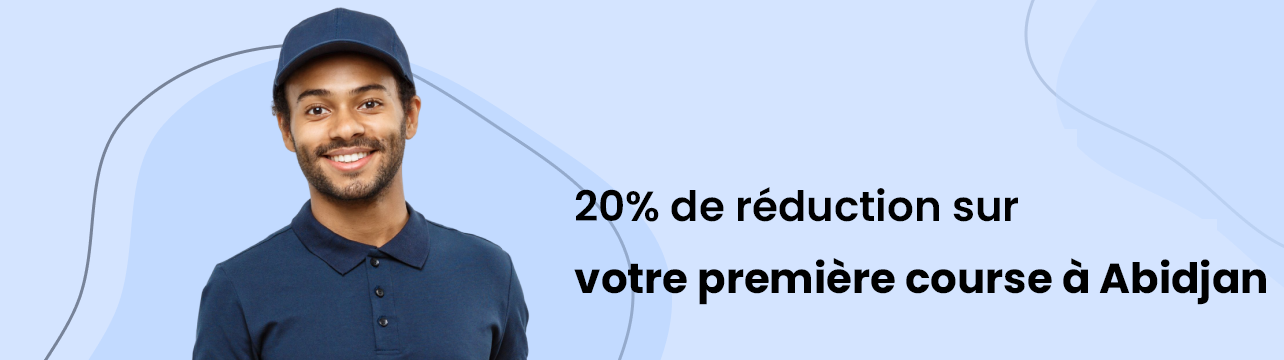
<style>
.page{position:relative;width:1284px;height:360px;background:#d4e4ff}
.page>*{position:absolute;margin:0}
.t1{font:42px/72px "Poppins-Bold";color:#000000}
.t2{font:42px/72px "Poppins-SemiBold";color:#000000}
</style>
<div class="page">
<p class="t1" style="left:574px;top:187px;width:692px;height:118px"><span class="t2">20% de réduction sur<br></span>votre première course à Abidjan</p>
</div>
